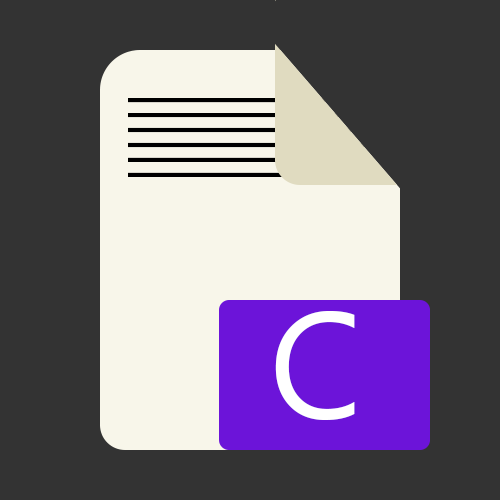
<style>
.page{position:relative;width:500px;height:500px;background:#333333}
.page>*{position:absolute;margin:0}
.t1{font:150px "MicrosoftTaiLe";color:#ffffff}
</style>
<div class="page">
<p class="t1" style="left:275px;top:311px;width:80px;height:109px">C</p>
</div>
